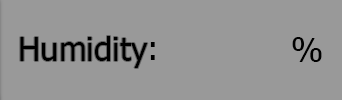
<style>
.page{position:relative;width:342px;height:100px;background:#999999}
.page>*{position:absolute;margin:0}
.t1{font:33px "Tahoma";color:#000000}
</style>
<div class="page">
<p class="t1" style="left:20px;top:36px;width:128px;height:32px">Humidity</p>
<p class="t1" style="left:292px;top:37px;width:30px;height:25px">%</p>
<p class="t1" style="left:150px;top:42px;width:5px;height:18px">:</p>
</div>
